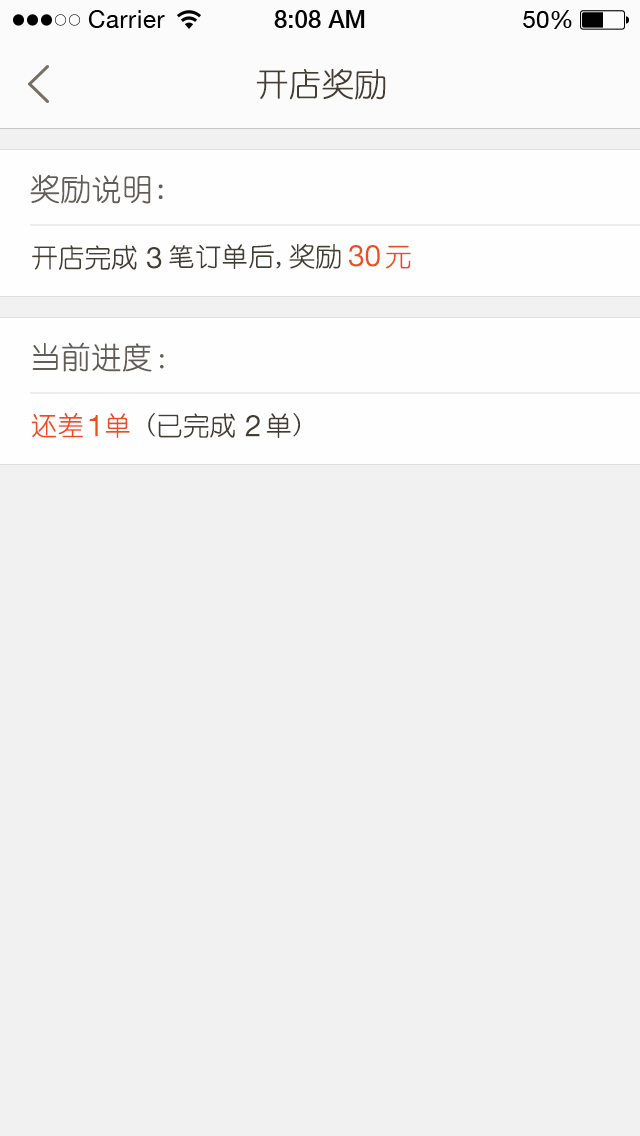
<style>
.page{position:relative;width:640px;height:1136px;background:#f1f1f1}
.page>*{position:absolute;margin:0}
.t1{font:32px "YouYuan";color:#433d33;text-transform:uppercase;font-weight:bold}
.t2{font:30px "YouYuan";color:#625e57;font-weight:bold}
.t3{font:26px "YouYuan";color:#433e34;font-weight:bold}
.t4{font:30px "HelveticaNeueLTPro-Roman";color:#ed4e1f;text-transform:uppercase}
.t5{font:26px "YouYuan";color:#ed4e1f;font-weight:bold}
.t6{font:30px "HelveticaNeueLTPro-Roman";color:#433e34;text-transform:uppercase}
.t7{font:26px "YouYuan";color:#ed4e1f;text-transform:uppercase;font-weight:bold}
.t8{font:26px "YouYuan";color:#433e34;text-transform:uppercase;font-weight:bold}
</style>
<div class="page">
<p class="t1" style="left:256px;top:69px;width:130px;height:31px">开店奖励</p>
<p class="t2" style="left:30px;top:174px;width:133px;height:30px">奖励说明:</p>
<p class="t3" style="left:32px;top:245px;width:105px;height:25px">开店完成</p>
<p class="t3" style="left:169px;top:244px;width:172px;height:25px">笔订单后,奖励</p>
<p class="t4" style="left:349px;top:245px;width:31px;height:22px">30</p>
<p class="t5" style="left:386px;top:245px;width:25px;height:24px">元</p>
<p class="t6" style="left:147px;top:247px;width:15px;height:22px">3</p>
<p class="t2" style="left:32px;top:342px;width:132px;height:30px">当前进度：</p>
<p class="t7" style="left:31px;top:413px;width:52px;height:25px">还差</p>
<p class="t7" style="left:105px;top:413px;width:25px;height:25px">单</p>
<p class="t8" style="left:148px;top:413px;width:87px;height:25px">(已完成</p>
<p class="t8" style="left:266px;top:413px;width:34px;height:25px">单)</p>
<p class="t4" style="left:89px;top:415px;width:9px;height:22px">1</p>
<p class="t6" style="left:245px;top:415px;width:15px;height:22px">2</p>
</div>
